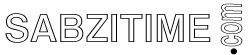
<style>
.page{position:relative;width:250px;height:55px;background:#ffffff}
.page>*{position:absolute;margin:0}
.t1{font:22.1px "Swiss721BT-BoldOutline";scale:1.71 1}
.t2{font:39px "Swiss721BT-BoldOutline";color:#000000}
</style>
<div class="page">
<p class="t1" style="left:220px;top:3px;width:23px;height:44px;rotate:-179deg">com</p>
<p class="t2" style="left:5px;top:13px;width:206px;height:30px">SABZITIME</p>
</div>
